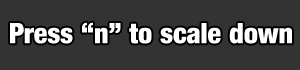
<style>
.page{position:relative;width:300px;height:70px;background:#333333}
.page>*{position:absolute;margin:0}
.t1{font:28px "Harvest";color:#ffffff}
</style>
<div class="page">
<p class="t1" style="left:10px;top:22px;width:282px;height:22px">Press “n” to scale down</p>
</div>
